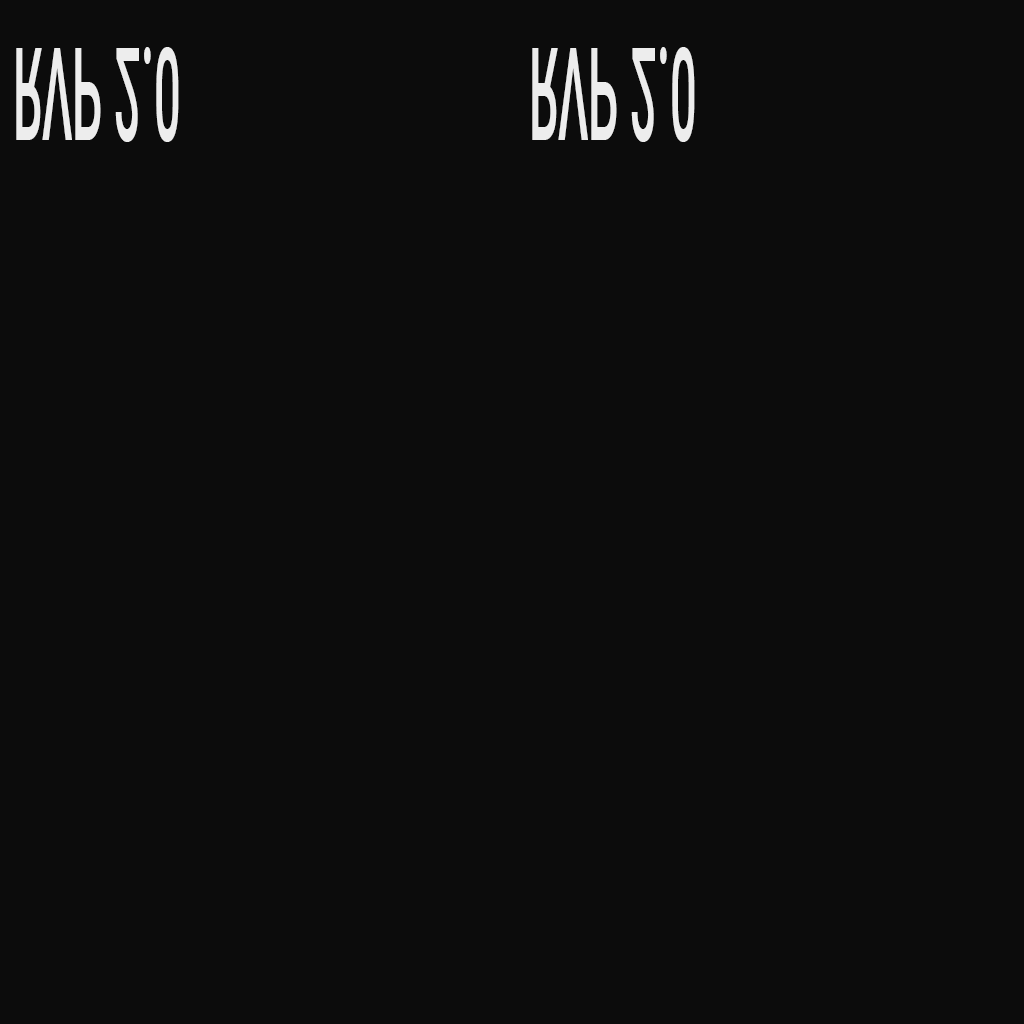
<style>
.page{position:relative;width:1024px;height:1024px;background:#0c0c0c}
.page>*{position:absolute;margin:0}
.t1{font:130px "Roboto-Medium";color:#ffffff;scale:0.36 1}
</style>
<div class="page">
<p class="t1" style="left:16px;top:47px;width:163px;height:95px;opacity:0.89">RVP 2.0</p>
<p class="t1" style="left:532px;top:47px;width:163px;height:95px;opacity:0.89">RVP 2.0</p>
</div>
